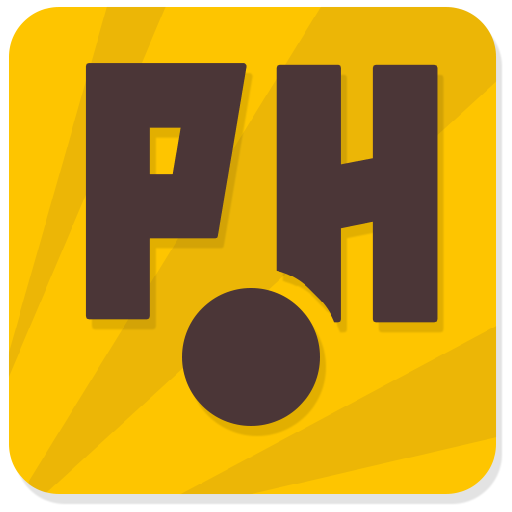
<style>
.page{position:relative;width:512px;height:512px;background:#fec500}
.page>*{position:absolute;margin:0}
.t1{font:341.7px "Slash";letter-spacing:0.05em;color:#4b3637;text-transform:uppercase}
.t2{font:343.4px "Slash";letter-spacing:0.05em;color:#4b3637;text-transform:uppercase}
</style>
<div class="page">
<p class="t1" style="left:85px;top:63px;width:162px;height:257px">P</p>
<p class="t2" style="left:276px;top:64px;width:162px;height:259px">H</p>
</div>
